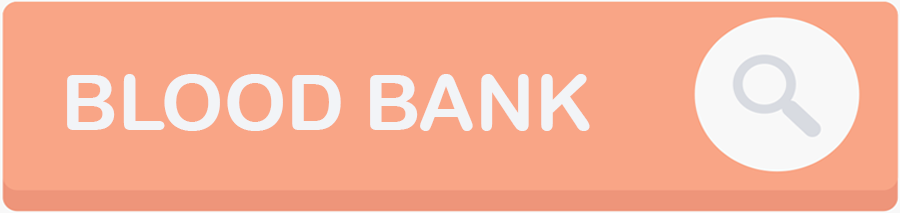
<style>
.page{position:relative;width:900px;height:213px;background:#f9a586}
.page>*{position:absolute;margin:0}
.t1{font:77.2px "ArialRoundedMTBold";color:#f2f4f7}
</style>
<div class="page">
<p class="t1" style="left:67px;top:74px;width:523px;height:57px">BLOOD BANK</p>
</div>
